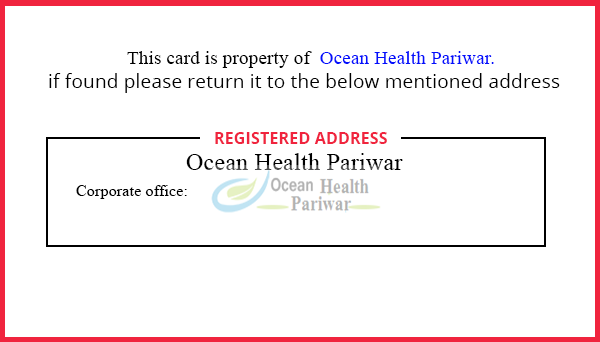
<style>
.page{position:relative;width:600px;height:342px;background:#ffffff}
.page>*{position:absolute;margin:0}
.t1{font:19px "TimesNewRomanPSMT";letter-spacing:0.01em;color:#000000}
.t2{font:19px "TimesNewRomanPSMT";letter-spacing:0.01em;color:#030ffc}
.t3{font:19px "OpenSans";letter-spacing:0.01em;color:#000000}
.t4{font:16px "OpenSans-Bold";letter-spacing:0.01em;color:#f0243e}
.t5{font:24px "TimesNewRomanPSMT";letter-spacing:0.01em}
.t6{font:16px "TimesNewRomanPSMT";letter-spacing:0.01em;color:#000000}
</style>
<div class="page">
<p class="t1" style="left:127px;top:51px;width:367px;height:17px">This card is property of  <span class="t2">Ocean Health Pariwar.</span></p>
<p class="t3" style="left:49px;top:73px;width:511px;height:20px">if found please return it to the below mentioned address</p>
<p class="t4" style="left:215px;top:132px;width:172px;height:12px">REGISTERED ADDRESS</p>
<p class="t5" style="left:186px;top:153px;width:217px;height:17px">Ocean Health Pariwar</p>
<p class="t6" style="left:76px;top:185px;width:111px;height:14px">Corporate office:</p>
</div>
